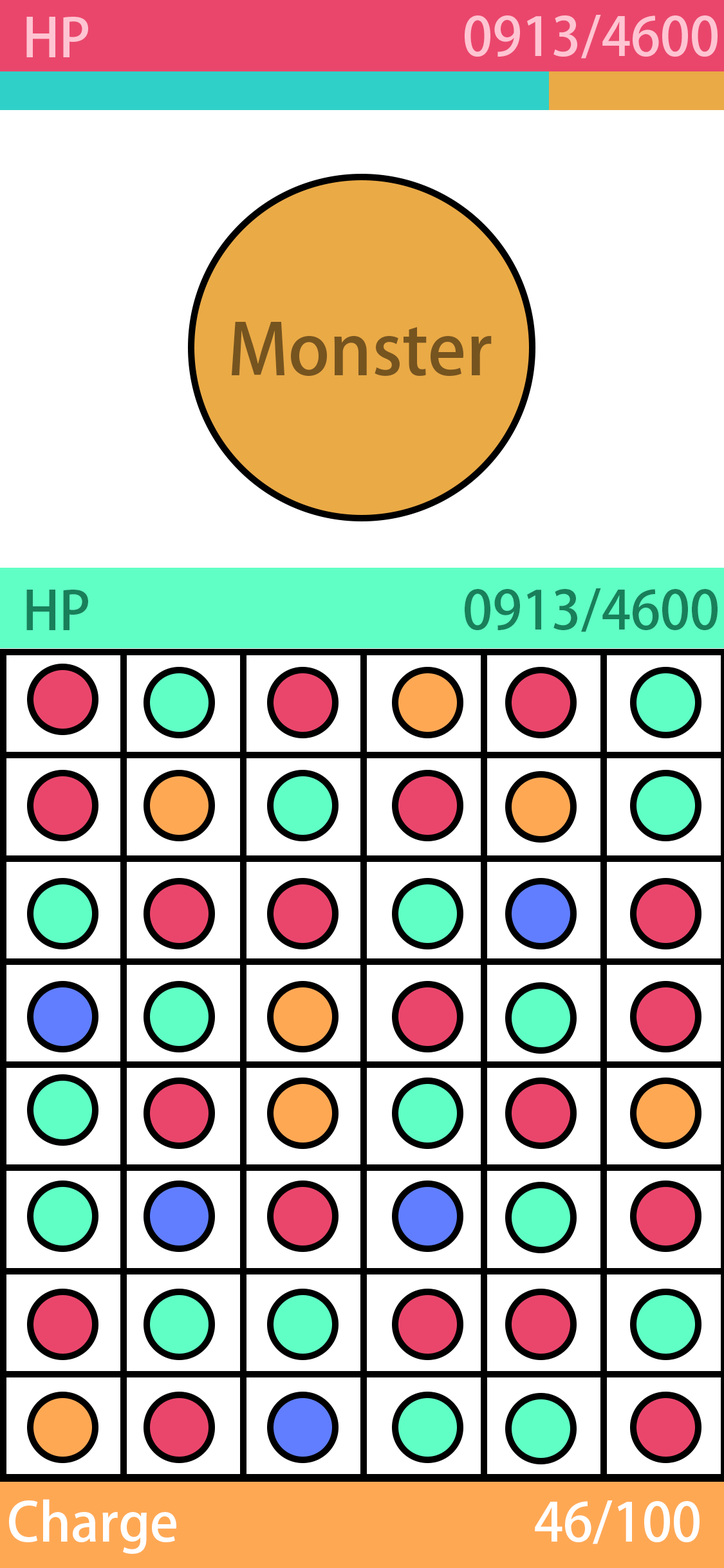
<style>
.page{position:relative;width:724px;height:1568px;background:#ffffff}
.page>*{position:absolute;margin:0}
.t1{font:52.8px "AdobeFanHeitiStd-Bold";color:#ffc4d2}
.t2{font:70.2px "AdobeFanHeitiStd-Bold";color:#76541f}
.t3{font:52.8px "AdobeFanHeitiStd-Bold";color:#197f5a}
.t4{font:52.8px "AdobeFanHeitiStd-Bold";color:#ffffff}
</style>
<div class="page">
<p class="t1" style="left:26px;top:17px;width:62px;height:40px">HP</p>
<p class="t1" style="left:465px;top:15px;width:253px;height:44px">0913/4600</p>
<p class="t2" style="left:232px;top:322px;width:260px;height:55px">Monster</p>
<p class="t3" style="left:26px;top:590px;width:62px;height:40px">HP</p>
<p class="t3" style="left:465px;top:588px;width:253px;height:44px">0913/4600</p>
<p class="t4" style="left:9px;top:1499px;width:691px;height:55px">Charge                              46/100</p>
</div>
